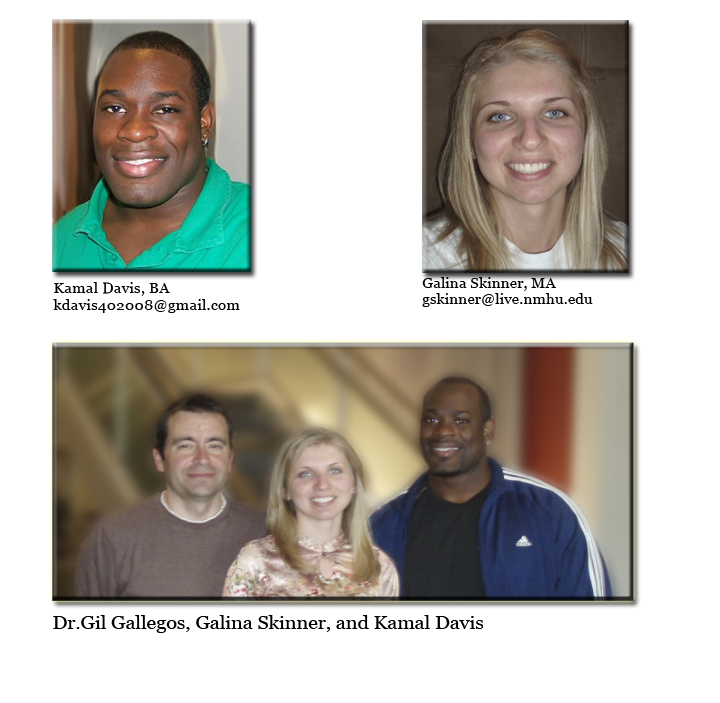
<style>
.page{position:relative;width:720px;height:703px;background:#ffffff}
.page>*{position:absolute;margin:0}
.t1{font:13.8px "Georgia";color:#000000;scale:1.11 1}
.t2{font:13.8px "Georgia";letter-spacing:0.01em;color:#000000;scale:1.11 1}
.t3{font:17.8px "Georgia";color:#000000;scale:1.11 1}
</style>
<div class="page">
<p class="t1" style="left:422px;top:277px;width:171px;height:30px">Galina Skinner, MA<br>gskinner@live.nmhu.edu</p>
<p class="t2" style="left:53px;top:282px;width:187px;height:31px">Kamal Davis, BA <br>kdavis402008@gmail.com</p>
<p class="t3" style="left:53px;top:615px;width:431px;height:18px">Dr.Gil Gallegos, Galina Skinner, and Kamal Davis</p>
</div>
